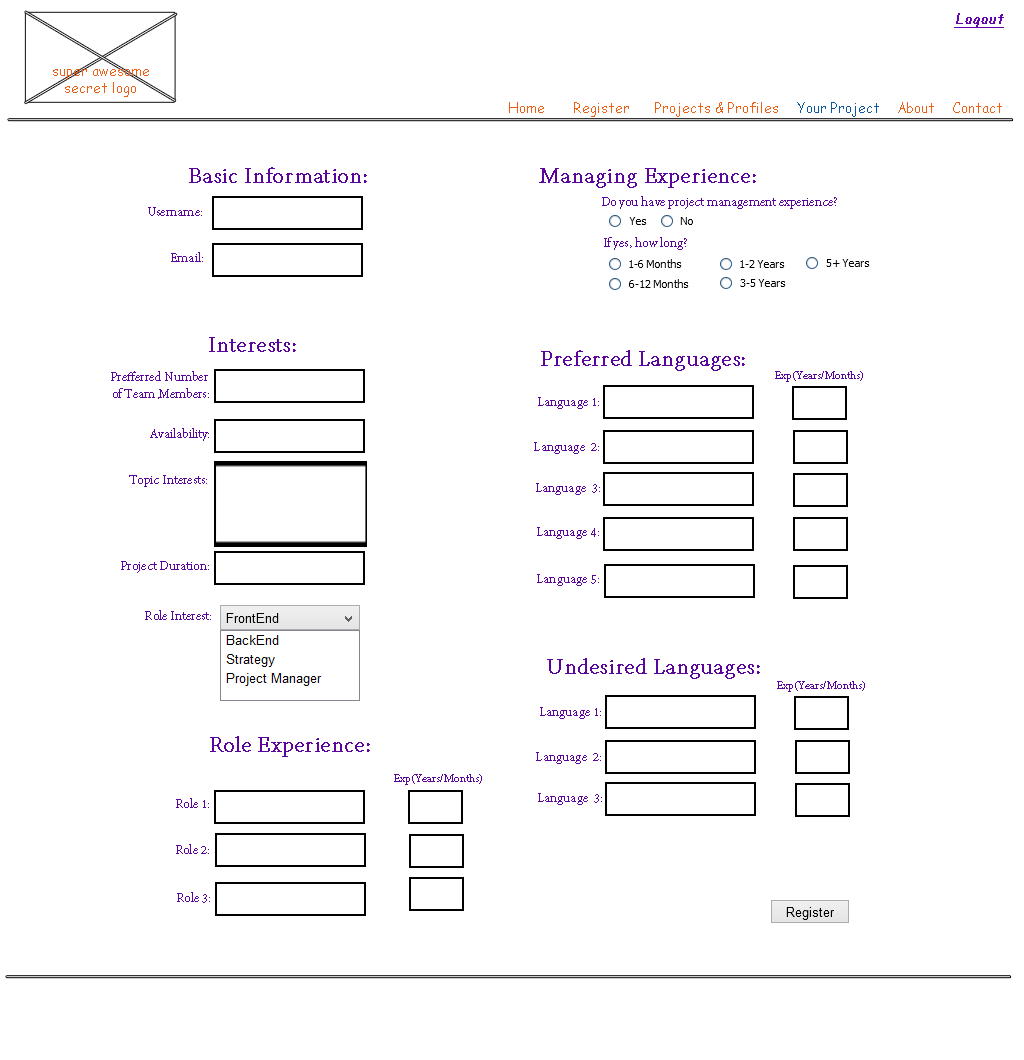
<style>
.page{position:relative;width:1024px;height:1060px;background:#ffffff}
.page>*{position:absolute;margin:0}
.t1{font:14px "ComicSansMS";color:#6406ad;font-weight:bold;font-style:italic;text-decoration:underline}
.t2{font:14px "ComicSansMS";color:#ef5f13}
.t3{font:14px "ComicSansMS";color:#0c56a2}
.t4{font:24px "AdobeDevanagari-Regular";color:#5a059c;font-weight:bold}
.t5{font:14px "AdobeDevanagari-Regular";color:#5a059c;font-weight:bold}
.t6{font:12px "AdobeDevanagari-Regular";color:#5a059c;font-weight:bold}
</style>
<div class="page">
<p class="t1" style="left:954px;top:13px;width:50px;height:15px">Logout</p>
<p class="t2" style="left:53px;top:69px;width:96px;height:28px;text-align:center">super awesome<br>secret logo</p>
<p class="t2" style="left:509px;top:102px;width:35px;height:11px">Home</p>
<p class="t2" style="left:574px;top:102px;width:55px;height:15px">Register</p>
<p class="t2" style="left:655px;top:102px;width:123px;height:15px">Projects &amp; Profiles</p>
<p class="t3" style="left:797px;top:102px;width:82px;height:15px">Your Project</p>
<p class="t2" style="left:898px;top:102px;width:36px;height:11px">About</p>
<p class="t2" style="left:953px;top:102px;width:49px;height:11px">Contact</p>
<p class="t4" style="left:189px;top:167px;width:178px;height:16px">Basic Information:</p>
<p class="t4" style="left:539px;top:168px;width:217px;height:20px">Managing Experience:</p>
<p class="t5" style="left:602px;top:196px;width:235px;height:13px">Do you have project management experience?</p>
<p class="t5" style="left:148px;top:207px;width:54px;height:9px">Username:</p>
<p class="t5" style="left:604px;top:237px;width:83px;height:13px">If yes, how long?</p>
<p class="t5" style="left:171px;top:252px;width:32px;height:10px">Email:</p>
<p class="t4" style="left:209px;top:337px;width:87px;height:15px">Interests:</p>
<p class="t4" style="left:541px;top:350px;width:204px;height:21px">Preferred Languages:</p>
<p class="t5" style="left:111px;top:371px;width:98px;height:28px;text-align:center">Prefferred Number <br>of Team Members:</p>
<p class="t6" style="left:775px;top:371px;width:88px;height:11px">Exp(Years/Months)</p>
<p class="t5" style="left:538px;top:397px;width:61px;height:12px">Language 1:</p>
<p class="t5" style="left:150px;top:428px;width:59px;height:13px">Availability:</p>
<p class="t5" style="left:534px;top:442px;width:65px;height:12px">Language  2:</p>
<p class="t5" style="left:129px;top:475px;width:78px;height:12px">Topic Interests:</p>
<p class="t5" style="left:536px;top:483px;width:64px;height:12px">Language  3:</p>
<p class="t5" style="left:537px;top:527px;width:62px;height:12px">Language 4:</p>
<p class="t5" style="left:121px;top:561px;width:88px;height:12px">Project Duration:</p>
<p class="t5" style="left:537px;top:574px;width:62px;height:12px">Language 5:</p>
<p class="t5" style="left:145px;top:610px;width:66px;height:10px">Role Interest:</p>
<p class="t4" style="left:547px;top:658px;width:213px;height:21px">Undesired Languages:</p>
<p class="t6" style="left:777px;top:681px;width:88px;height:11px">Exp(Years/Months)</p>
<p class="t5" style="left:540px;top:707px;width:61px;height:12px">Language 1:</p>
<p class="t4" style="left:210px;top:736px;width:160px;height:21px">Role Experience:</p>
<p class="t5" style="left:536px;top:752px;width:65px;height:12px">Language  2:</p>
<p class="t6" style="left:394px;top:774px;width:88px;height:11px">Exp(Years/Months)</p>
<p class="t5" style="left:176px;top:798px;width:33px;height:10px">Role 1:</p>
<p class="t5" style="left:538px;top:793px;width:64px;height:12px">Language  3:</p>
<p class="t5" style="left:176px;top:844px;width:33px;height:10px">Role 2:</p>
<p class="t5" style="left:177px;top:892px;width:33px;height:11px">Role 3:</p>
</div>
